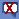
<style>
.page{position:relative;width:19px;height:19px;background:#6f8cca}
.page>*{position:absolute;margin:0}
.t1{font:17px "Arial-BoldMT";letter-spacing:-0.02em;color:#ab0202}
</style>
<div class="page">
<p class="t1" style="left:5px;top:2px;width:9px;height:12px">X</p>
</div>
